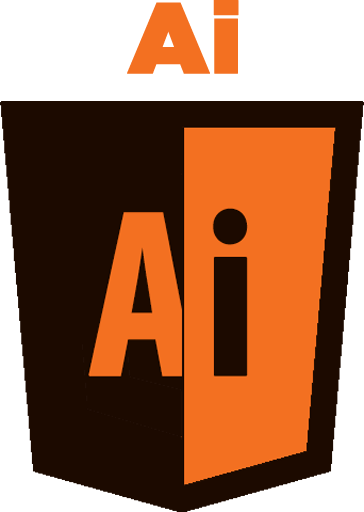
<style>
.page{position:relative;width:364px;height:512px;background:#1c0a00}
.page>*{position:absolute;margin:0}
.t1{font:100px "GothamUltra";color:#f37021;font-weight:bold}
</style>
<div class="page">
<p class="t1" style="left:127px;top:0px;width:112px;height:74px">Ai</p>
</div>
